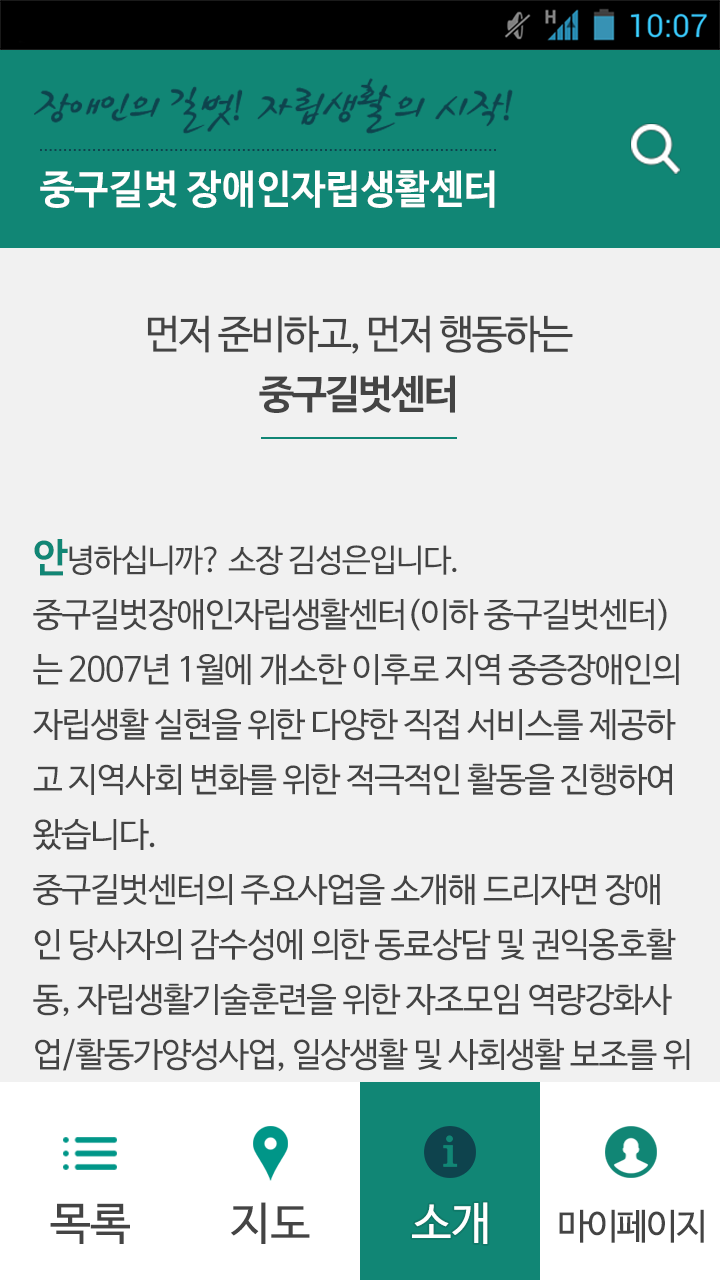
<style>
.page{position:relative;width:720px;height:1280px;background:#f1f1f1}
.page>*{position:absolute;margin:0}
.t1{font:40px "NanumBarunGothicOTFBold";letter-spacing:0.01em;color:#ffffff;scale:0.96 1}
.t2{font:40px/60px "NanumBarunGothicOTF";letter-spacing:-0.05em;color:#444444}
.t3{font:40px/60px "NanumBarunGothicOTFBold";letter-spacing:-0.05em;color:#444444}
.t4{font:34px/55px "NanumBarunGothicOTF";letter-spacing:-0.03em;color:#444444}
.t5{font:40px/55px "NanumBarunGothicOTFBold";letter-spacing:-0.03em;color:#118675}
.t6{font:32px/55px "NanumBarunGothicOTF";letter-spacing:-0.03em;color:#444444}
.t7{font:45px "NanumBarunGothicOTF";color:#444444}
.t8{font:45px "NanumBarunGothicOTF";color:#ffffff}
.t9{font:36px "NanumBarunGothicOTF";letter-spacing:-0.05em;color:#444444}
</style>
<div class="page">
<p class="t1" style="left:40px;top:170px;width:455px;height:38px">중구길벗 장애인자립생활센터</p>
<p class="t2" style="left:147px;top:315px;width:426px;height:98px;text-align:center">먼저 준비하고, 먼저 행동하는<br><span class="t3">중구길벗센터</span></p>
<p class="t4" style="left:33px;top:539px;width:657px;height:642px"><span class="t5">안</span><span class="t6">녕하십니까? 소장 김성은입니다.<br></span>중구길벗장애인자립생활센터(이하 중구길벗센터)<br>는 2007년 1월에 개소한 이후로 지역 중증장애인의 <br>자립생활 실현을 위한 다양한 직접 서비스를 제공하<br>고 지역사회 변화를 위한 적극적인 활동을 진행하여<br>왔습니다. <br>중구길벗센터의 주요사업을 소개해 드리자면 장애<br>인 당사자의 감수성에 의한 동료상담 및 권익옹호활<br>동, 자립생활기술훈련을 위한 자조모임 역량강화사<br>업/활동가양성사업, 일상생활 및 사회생활 보조를 위<br>한 활동보조인 파견, 지역사회 환경변화를<br> 위한 지역주민 인식개선사업/유니버설디자인 실천</p>
<p class="t7" style="left:50px;top:1203px;width:80px;height:41px">목록</p>
<p class="t7" style="left:231px;top:1202px;width:79px;height:42px">지도</p>
<p class="t8" style="left:412px;top:1202px;width:76px;height:42px">소개</p>
<p class="t9" style="left:559px;top:1209px;width:145px;height:34px">마이페이지</p>
</div>
